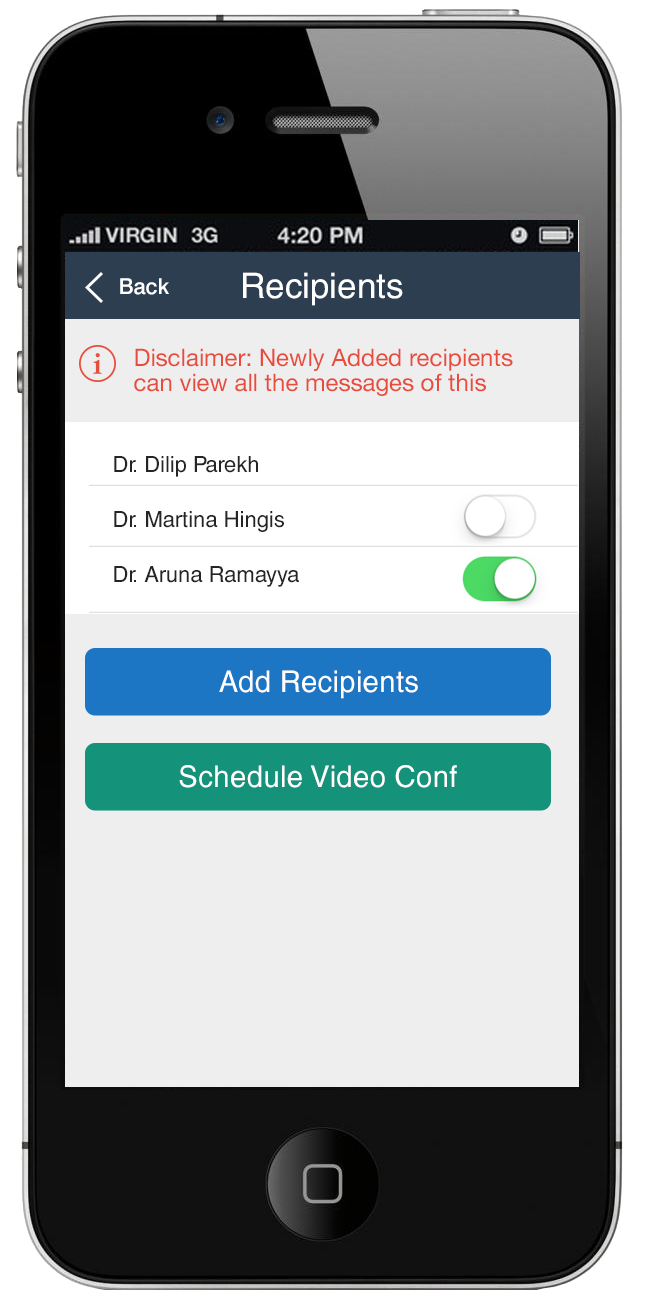
<style>
.page{position:relative;width:648px;height:1300px;background:#eeeeee}
.page>*{position:absolute;margin:0}
.t1{font:22px "Swiss721BT-Medium";color:#ffffff}
.t2{font:35px "HelveticaLT";color:#ffffff}
.t3{font:24px/25px "HelveticaNeue";color:#e84c3d}
.t4{font:22px/55px "HelveticaCE-Regular";color:#252525}
.t5{font:30px "HelveticaCyr-Upright";color:#ffffff}
</style>
<div class="page">
<p class="t1" style="left:120px;top:278px;width:49px;height:17px">Back</p>
<p class="t2" style="left:243px;top:272px;width:160px;height:34px">Recipients</p>
<p class="t3" style="left:134px;top:348px;width:379px;height:48px">Disclaimer: Newly Added recipients can view all the messages of this thread.</p>
<p class="t4" style="left:114px;top:456px;width:185px;height:131px">Dr. Dilip Parekh<br>Dr. Martina Hingis<br>Dr. Aruna Ramayya</p>
<p class="t5" style="left:219px;top:670px;width:199px;height:29px">Add Recipients</p>
<p class="t5" style="left:179px;top:765px;width:278px;height:23px">Schedule Video Conf</p>
</div>
